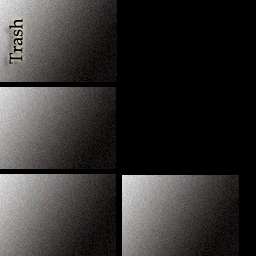
<style>
.page{position:relative;width:256px;height:256px;background:#000000}
.page>*{position:absolute;margin:0}
.t1{font:18px "BookAntiqua";color:#000000}
</style>
<div class="page">
<p class="t1" style="left:9px;top:18px;width:14px;height:46px;rotate:-90deg">Trash</p>
</div>
